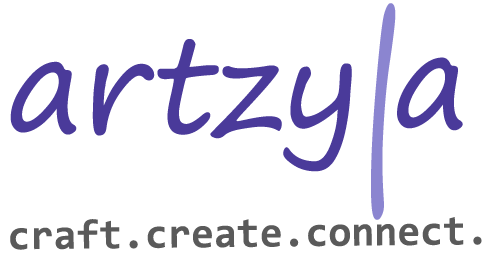
<style>
.page{position:relative;width:500px;height:262px;background:#ffffff}
.page>*{position:absolute;margin:0}
.t1{font:250.1px "SegoePrint";color:#8b85d0;scale:0.52 1}
.t2{font:131px "SegoePrint";color:#4a3a9a}
.t3{font:41.7px "Consolas-Bold";color:#5a5a5a}
</style>
<div class="page">
<p class="t1" style="left:371px;top:3px;width:25px;height:217px">l</p>
<p class="t2" style="left:10px;top:39px;width:342px;height:133px">artzy</p>
<p class="t2" style="left:397px;top:57px;width:66px;height:74px">a</p>
<p class="t3" style="left:10px;top:217px;width:472px;height:33px;rotate:-1deg">craft.create.connect.</p>
</div>
